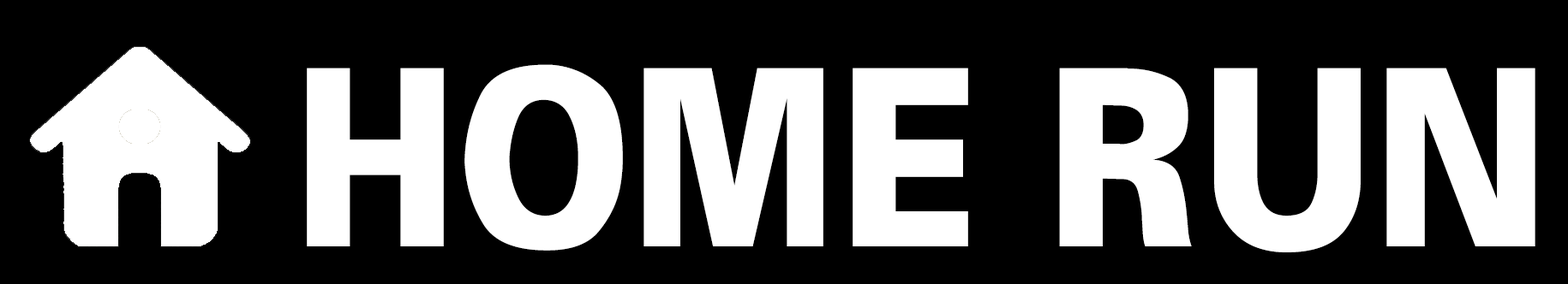
<style>
.page{position:relative;width:1568px;height:284px;background:#000000}
.page>*{position:absolute;margin:0}
.t1{font:246.3px "Univers-Black";color:#ffffff;scale:0.85 1}
</style>
<div class="page">
<p class="t1" style="left:307px;top:64px;width:1228px;height:189px">HOME RUN</p>
</div>
